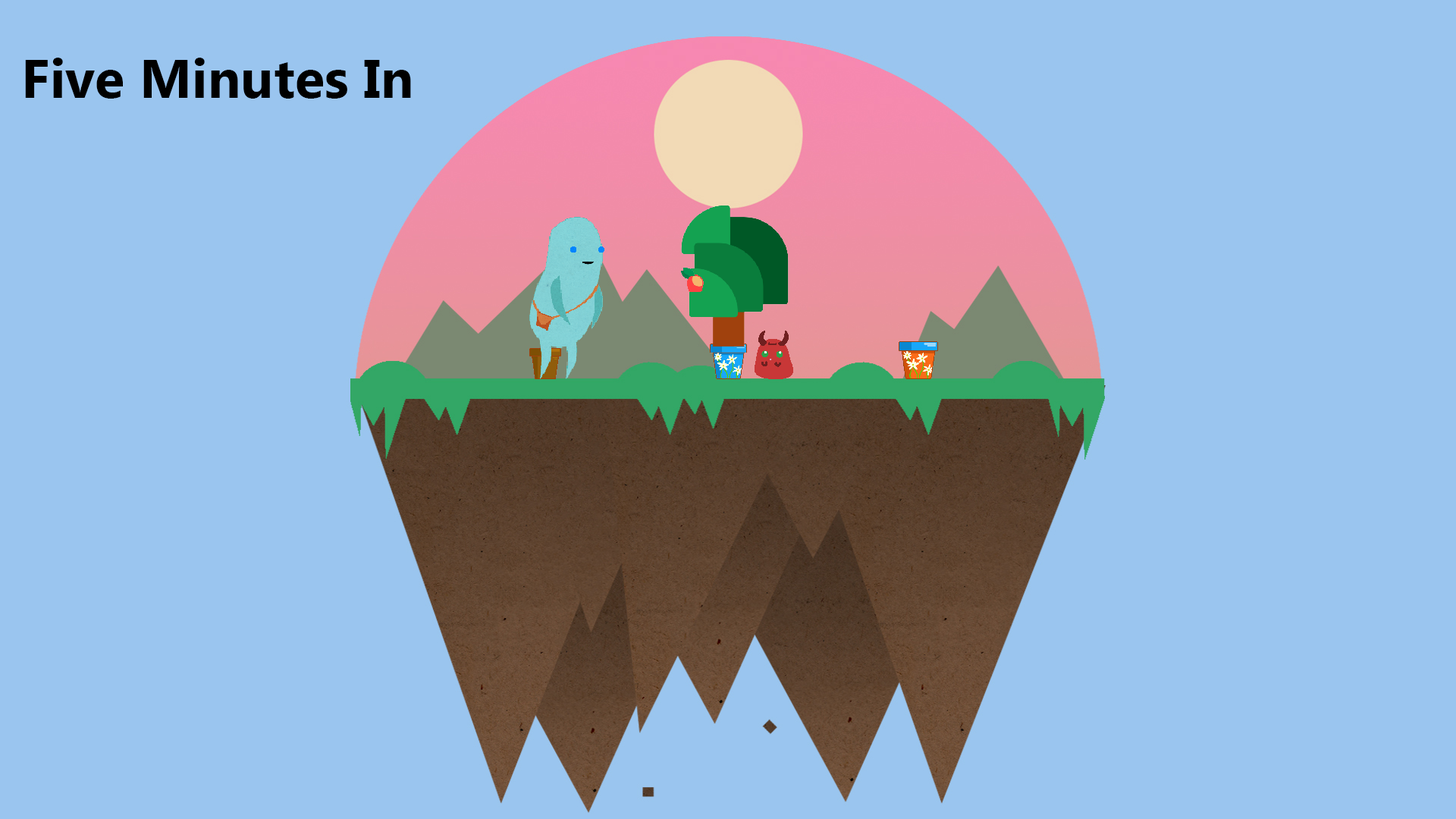
<style>
.page{position:relative;width:1456px;height:819px;background:#9ac5ef}
.page>*{position:absolute;margin:0}
.t1{font:54.6px "MyanmarText-Bold";color:#000000}
</style>
<div class="page">
<p class="t1" style="left:25px;top:58px;width:386px;height:41px">Five Minutes In</p>
</div>
